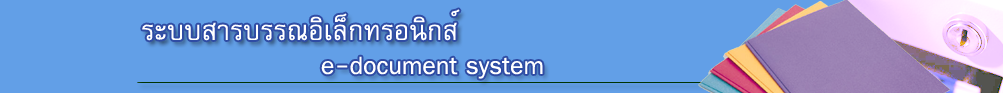
<style>
.page{position:relative;width:1003px;height:93px;background:#629fe7}
.page>*{position:absolute;margin:0}
.t1{font:38px "FreesiaUPC";color:#ffffff}
</style>
<div class="page">
<p class="t1" style="left:142px;top:9px;width:318px;height:32px">ระบบสารบรรณอิเล็กทรอนิกส์</p>
<p class="t1" style="left:321px;top:56px;width:222px;height:23px">e-document system</p>
</div>
